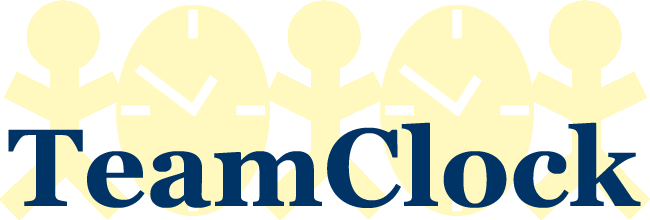
<style>
.page{position:relative;width:650px;height:220px;background:#fff9bf}
.page>*{position:absolute;margin:0}
.t1{font:110px "Georgia-Bold";color:#003366}
</style>
<div class="page">
<p class="t1" style="left:8px;top:122px;width:633px;height:86px">TeamClock</p>
</div>
